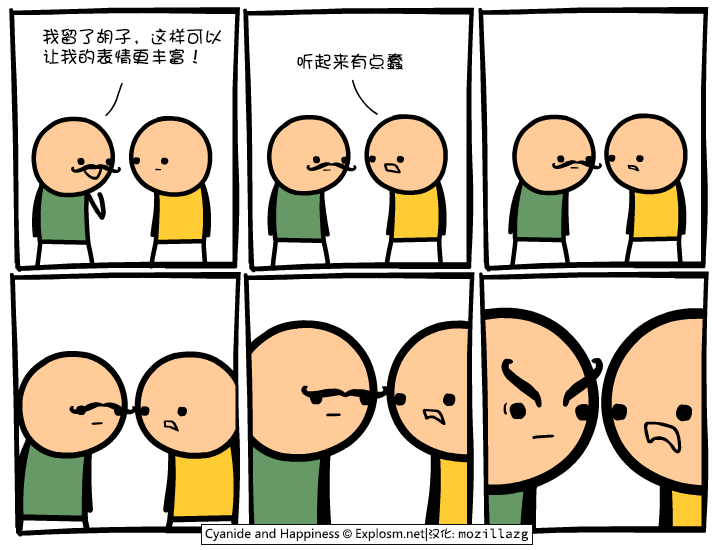
<style>
.page{position:relative;width:720px;height:550px;background:#ffffff}
.page>*{position:absolute;margin:0}
.t1{font:18px/20px "DFPShaoNvW5";color:#000000}
.t2{font:18px "DFPShaoNvW5";color:#000000}
</style>
<div class="page">
<p class="t1" style="left:42px;top:28px;width:179px;height:37px">我留了胡子，这样可以<br>让我的表情更丰富！</p>
<p class="t2" style="left:297px;top:53px;width:106px;height:17px">听起来有点蠢</p>
</div>
